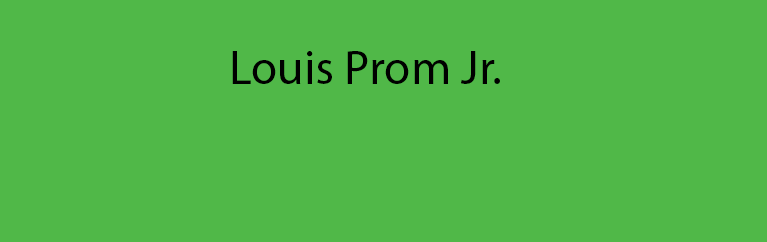
<style>
.page{position:relative;width:767px;height:242px;background:#50b848}
.page>*{position:absolute;margin:0}
.t1{font:48px "MyriadPro-Regular";color:#000000}
</style>
<div class="page">
<p class="t1" style="left:232px;top:51px;width:268px;height:33px">Louis Prom Jr.</p>
</div>
